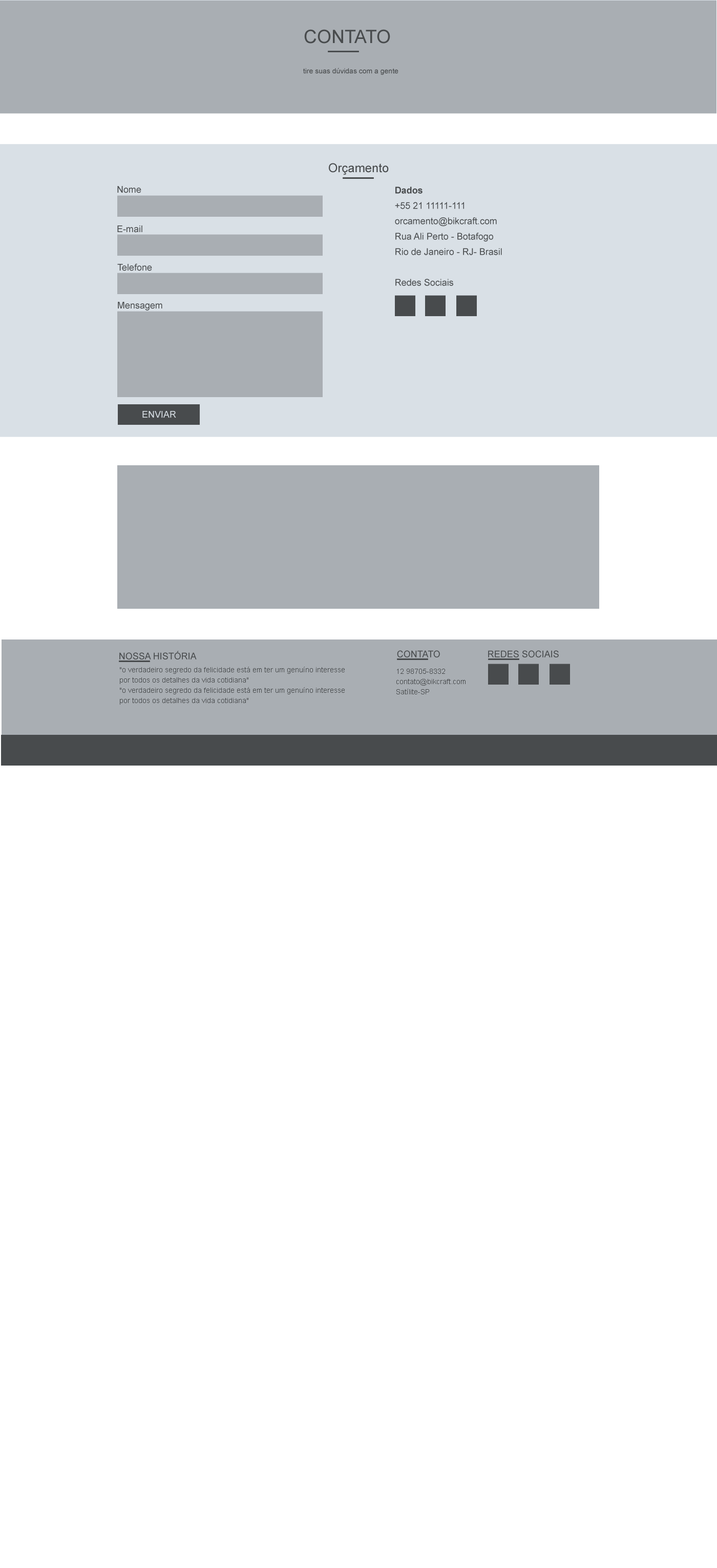
<style>
.page{position:relative;width:717px;height:1568px;background:#ffffff}
.page>*{position:absolute;margin:0}
.t1{font:18.4px "ArialMT";color:#484b4d;text-transform:uppercase}
.t2{font:7.2px "ArialMT";color:#484b4d}
.t3{font:12.3px "ArialMT";color:#484b4d}
.t4{font:9.2px "ArialMT";color:#484b4d}
.t5{font:9.2px/15.4px "ArialMT";color:#484b4d}
.t6{font:9.2px/15.4px "Arial-BoldMT";color:#484b4d}
.t7{font:9.2px "ArialMT";color:#d9e0e6}
.t8{font:9.2px "ArialMT";color:#484b4d;text-transform:uppercase}
.t9{font:7.2px/10.2px "ArialMT";color:#484b4d}
</style>
<div class="page">
<p class="t1" style="left:304px;top:29px;width:86px;height:15px">Contato</p>
<p class="t2" style="left:303px;top:68px;width:96px;height:7px">tire suas dúvidas com a gente</p>
<p class="t3" style="left:329px;top:163px;width:60px;height:12px">Orçamento</p>
<p class="t4" style="left:117px;top:186px;width:24px;height:7px">Nome</p>
<p class="t5" style="left:395px;top:187px;width:107px;height:99px"><span class="t6">Dados<br></span>+55 21 11111-111<br>orcamento@bikcraft.com<br>Rua Ali Perto - Botafogo<br>Rio de Janeiro - RJ- Brasil<br><br>Redes Sociais</p>
<p class="t4" style="left:117px;top:225px;width:25px;height:8px">E-mail</p>
<p class="t4" style="left:117px;top:263px;width:35px;height:8px">Telefone</p>
<p class="t4" style="left:118px;top:302px;width:44px;height:9px">Mensagem</p>
<p class="t7" style="left:142px;top:411px;width:34px;height:7px">ENVIAR</p>
<p class="t8" style="left:119px;top:651px;width:78px;height:8px">Nossa História</p>
<p class="t8" style="left:397px;top:650px;width:43px;height:7px">contato</p>
<p class="t8" style="left:488px;top:650px;width:71px;height:7px">REDES SOCIAIS</p>
<p class="t9" style="left:120px;top:667px;width:225px;height:38px;text-align:center">"o verdadeiro segredo da felicidade está em ter um genuíno interesse por todos os detalhes da vida cotidiana"<br>"o verdadeiro segredo da felicidade está em ter um genuíno interesse por todos os detalhes da vida cotidiana"</p>
<p class="t9" style="left:397px;top:669px;width:69px;height:25px">12 98705-8332<br>contato@bikcraft.com<br>Satílite-SP</p>
</div>
